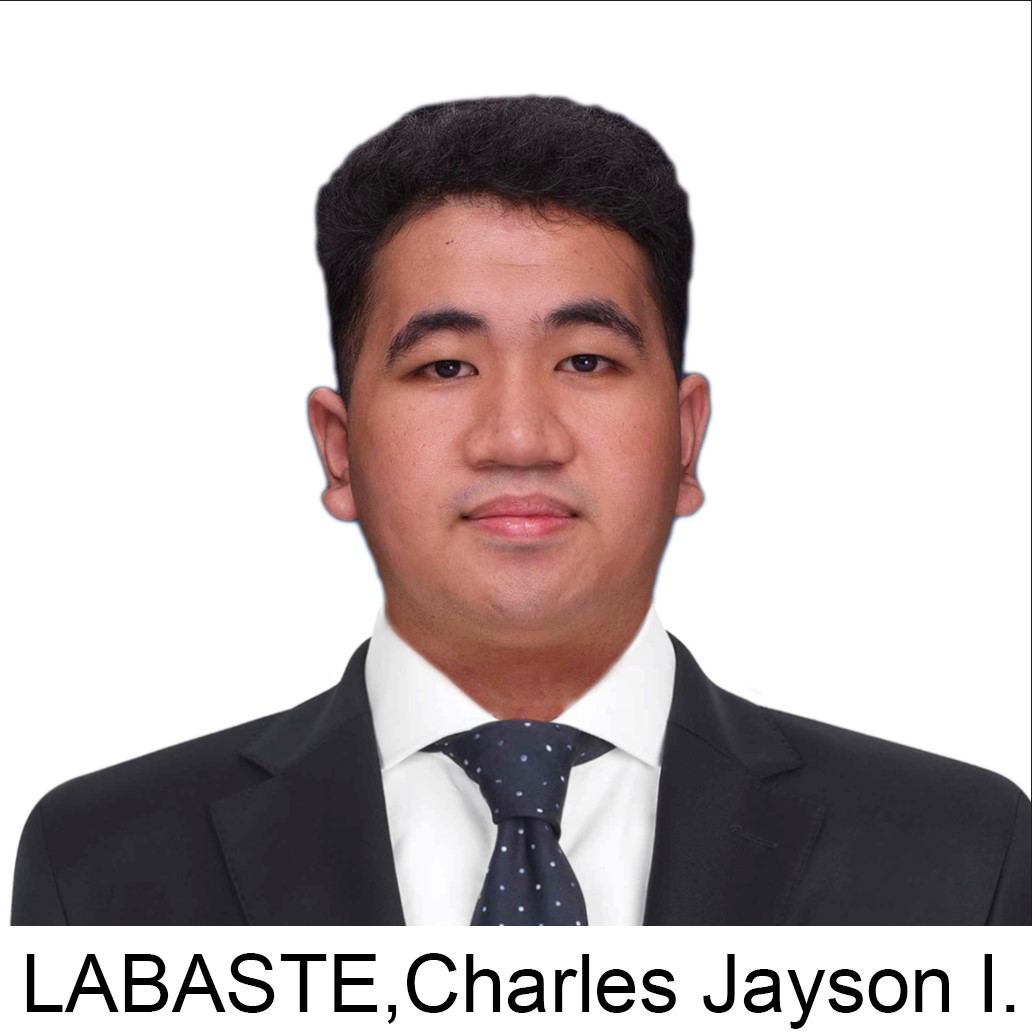
<style>
.page{position:relative;width:1032px;height:1033px;background:#ffffff}
.page>*{position:absolute;margin:0}
.t1{font:80px "ArialMT";color:#000000}
</style>
<div class="page">
<p class="t1" style="left:26px;top:953px;width:989px;height:76px">LABASTE,Charles Jayson I.</p>
</div>
